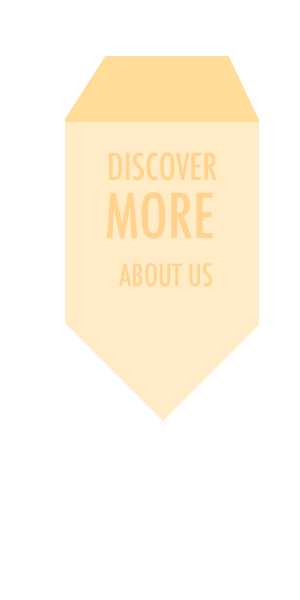
<style>
.page{position:relative;width:300px;height:600px;background:#ffffff}
.page>*{position:absolute;margin:0}
.t1{font:36px/48px "Futura-CondensedMedium";color:#ffd28e}
.t2{font:60px/58px "Futura-CondensedMedium";color:#ffd28e}
.t3{font:30px/48px "Futura-CondensedMedium";color:#ffd28e}
</style>
<div class="page">
<p class="t1" style="left:106px;top:152px;width:111px;height:135px;text-align:center">DISCOVER <br><span class="t2">MORE <br></span><span class="t3">ABOUT US</span></p>
</div>
